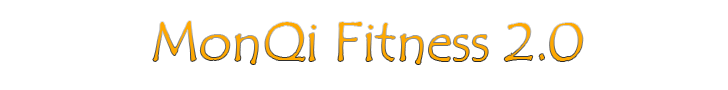
<style>
.page{position:relative;width:728px;height:90px;background:#ffffff}
.page>*{position:absolute;margin:0}
.t1{font:55px "TempusSansITC";color:#ffa800}
</style>
<div class="page">
<p class="t1" style="left:153px;top:21px;width:430px;height:43px">MonQi Fitness 2.0</p>
</div>
